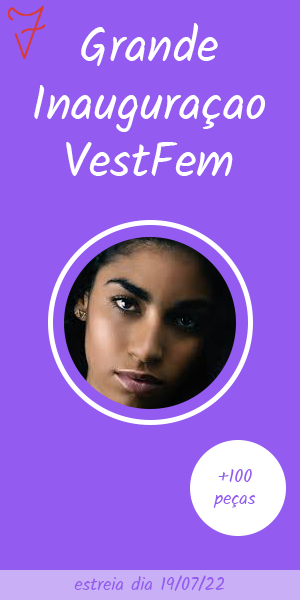
<style>
.page{position:relative;width:300px;height:600px;background:#935bf0}
.page>*{position:absolute;margin:0}
.t1{font:48px "Kalam-Regular";color:#ffffff}
.t2{font:18px "Kalam-Regular";color:#935bf0}
</style>
<div class="page">
<p class="t1" style="left:34px;top:23px;width:231px;height:153px;text-align:center">Grande<br>Inauguraçao<br>VestFem</p>
<p class="t2" style="left:213px;top:469px;width:43px;height:39px;text-align:center">+100<br>peças</p>
<p class="t2" style="left:74px;top:575px;width:151px;height:16px">estreia dia 19/07/22</p>
</div>
